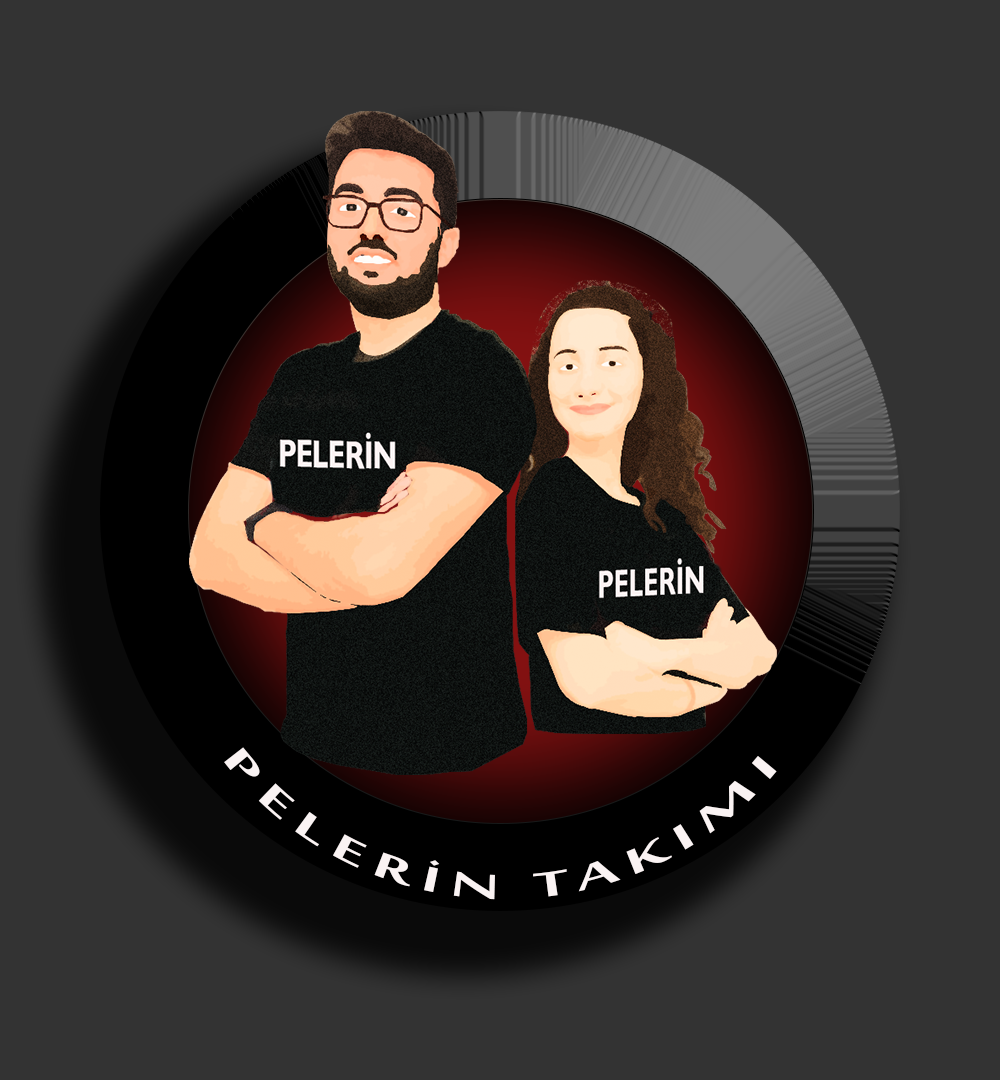
<style>
.page{position:relative;width:1000px;height:1080px;background:#333333}
.page>*{position:absolute;margin:0}
.t1{font:48px/61px "SakkalMajalla-Bold";letter-spacing:0.12em;color:#faf3f3;scale:1.48 1}
</style>
<div class="page">
<p class="t1" style="left:224px;top:747px;width:553px;height:153px;text-align:center">PELERİN TAKIMI</p>
</div>
